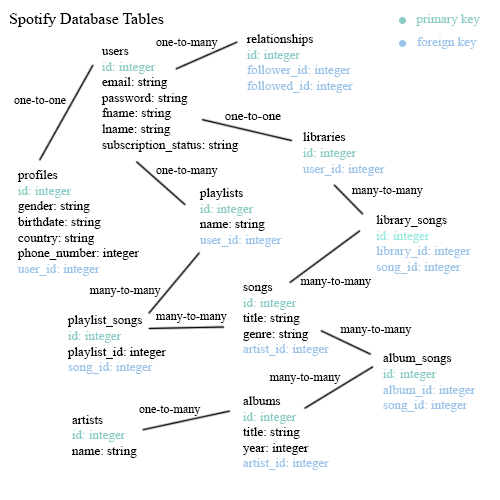
<style>
.page{position:relative;width:500px;height:500px;background:#ffffff}
.page>*{position:absolute;margin:0}
.t1{font:16px "TimesNewRomanPSMT";color:#000000}
.t2{font:13px "TimesNewRomanPSMT";color:#8accc5}
.t3{font:12px "TimesNewRomanPSMT";color:#000000}
.t4{font:13px "TimesNewRomanPSMT";color:#99c3e8}
.t5{font:13px "TimesNewRomanPSMT";color:#000000}
.t6{font:13px "TimesNewRomanPSMT";color:#99e8df}
</style>
<div class="page">
<p class="t1" style="left:9px;top:13px;width:155px;height:14px">Spotify Database Tables</p>
<p class="t2" style="left:416px;top:14px;width:64px;height:12px">primary key</p>
<p class="t3" style="left:156px;top:38px;width:62px;height:11px">one-to-many</p>
<p class="t4" style="left:247px;top:34px;width:106px;height:59px"><span class="t5">relationships<br></span><span class="t2">id: integer<br></span>follower_id: integer<br>followed_id: integer</p>
<p class="t4" style="left:417px;top:37px;width:60px;height:12px">foreign key</p>
<p class="t5" style="left:101px;top:49px;width:138px;height:103px">users<br><span class="t2">id: integer<br></span>email: string<br>password: string<br>fname: string<br>lname: string<br>subscription_status: string</p>
<p class="t3" style="left:14px;top:96px;width:52px;height:8px">one-to-one</p>
<p class="t5" style="left:225px;top:112px;width:56px;height:8px">one-to-one</p>
<p class="t4" style="left:303px;top:132px;width:82px;height:44px"><span class="t5">libraries<br></span><span class="t2">id: integer<br></span>user_id: integer</p>
<p class="t5" style="left:17px;top:170px;width:122px;height:106px">profiles<br><span class="t2">id: integer<br></span>gender: string<br>birthdate: string<br>country: string<br>phone_number: integer<br><span class="t4">user_id: integer</span></p>
<p class="t3" style="left:156px;top:166px;width:62px;height:11px">one-to-many</p>
<p class="t4" style="left:199px;top:188px;width:83px;height:59px"><span class="t5">playlists<br></span><span class="t2">id: integer<br></span><span class="t5">name: string<br></span>user_id: integer</p>
<p class="t3" style="left:352px;top:186px;width:71px;height:11px">many-to-many</p>
<p class="t4" style="left:376px;top:215px;width:95px;height:59px"><span class="t5">library_songs<br></span><span class="t6">id: integer<br></span>library_id: integer<br>song_id: integer</p>
<p class="t3" style="left:300px;top:277px;width:71px;height:11px">many-to-many</p>
<p class="t3" style="left:89px;top:286px;width:72px;height:11px">many-to-many</p>
<p class="t5" style="left:242px;top:285px;width:87px;height:71px">songs<br><span class="t2">id: integer<br></span>title: string<br>genre: string<br><span class="t4">artist_id: integer</span></p>
<p class="t5" style="left:67px;top:315px;width:99px;height:59px">playlist_songs<br><span class="t2">id: integer<br></span>playlist_id: integer<br><span class="t4">song_id: integer</span></p>
<p class="t3" style="left:156px;top:312px;width:71px;height:11px">many-to-many</p>
<p class="t3" style="left:340px;top:325px;width:72px;height:11px">many-to-many</p>
<p class="t4" style="left:383px;top:353px;width:93px;height:59px"><span class="t5">album_songs<br></span><span class="t2">id: integer<br></span>album_id: integer<br>song_id: integer</p>
<p class="t3" style="left:269px;top:373px;width:72px;height:11px">many-to-many</p>
<p class="t5" style="left:242px;top:396px;width:87px;height:74px">albums<br><span class="t2">id: integer<br></span>title: string<br>year: integer<br><span class="t4">artist_id: integer</span></p>
<p class="t3" style="left:139px;top:405px;width:62px;height:11px">one-to-many</p>
<p class="t5" style="left:72px;top:415px;width:65px;height:43px">artists<br><span class="t2">id: integer<br></span>name: string</p>
</div>
